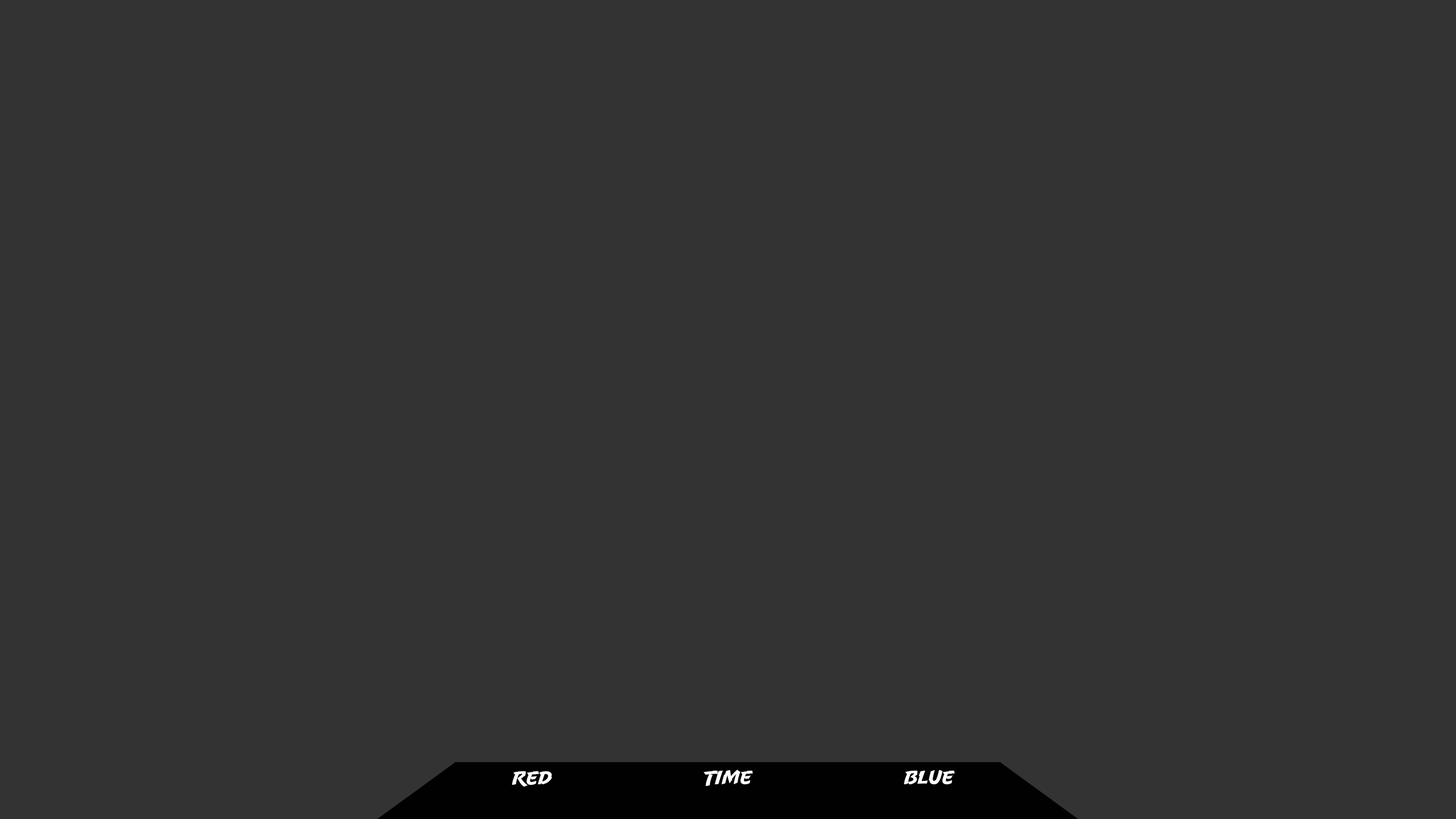
<style>
.page{position:relative;width:1456px;height:819px;background:#333333}
.page>*{position:absolute;margin:0}
.t1{font:19px "UppercutAngle";color:#ffffff}
</style>
<div class="page">
<p class="t1" style="left:512px;top:771px;width:40px;height:16px">Red</p>
<p class="t1" style="left:704px;top:770px;width:49px;height:16px">Time</p>
<p class="t1" style="left:904px;top:770px;width:51px;height:14px">Blue</p>
</div>
